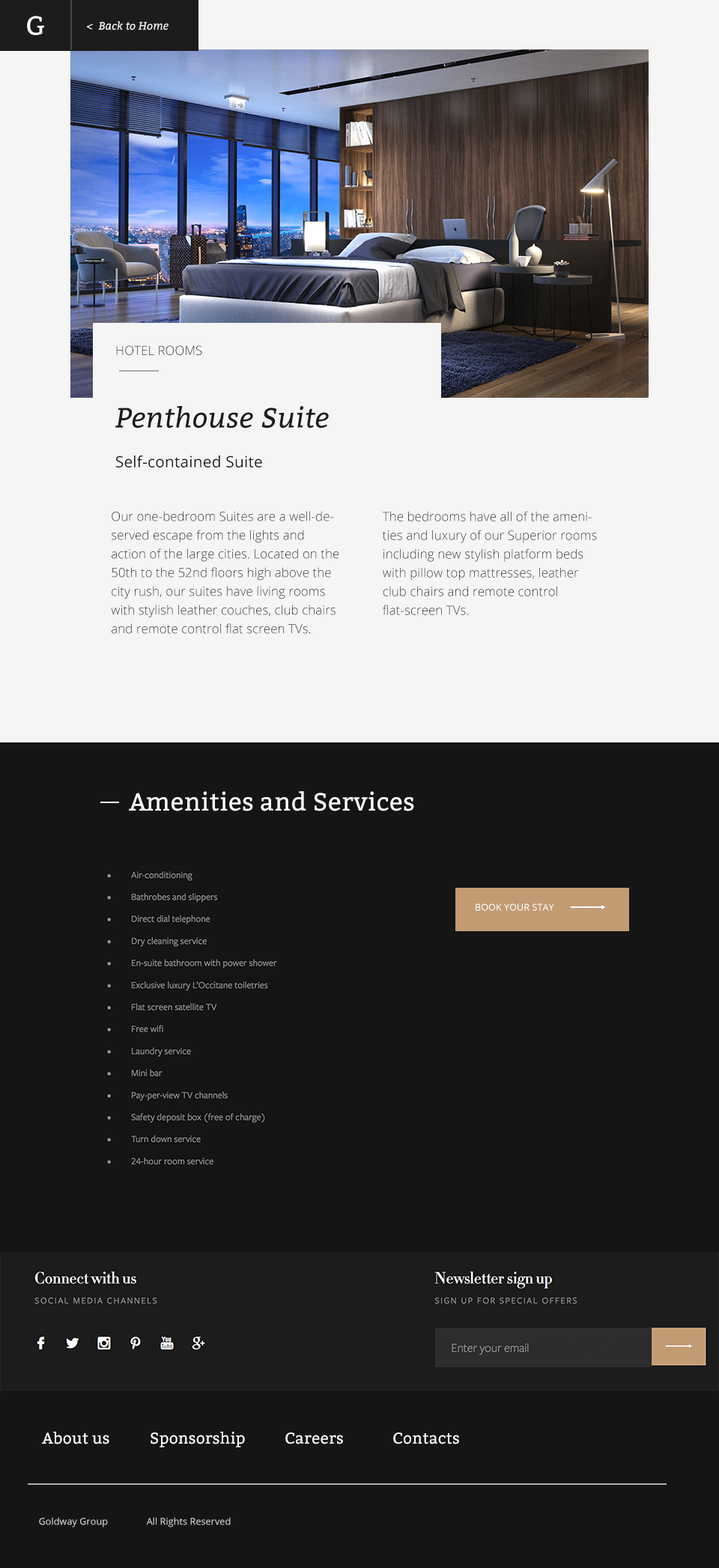
<style>
.page{position:relative;width:719px;height:1568px;background:#151515}
.page>*{position:absolute;margin:0}
.t1{font:25.9px "Bitter-Regular";letter-spacing:0.01em;color:#ffffff}
.t2{font:10.8px "Bitter-Italic";letter-spacing:0.01em;color:#ffffff}
.t3{font:12.5px "OpenSans-Light";letter-spacing:0.01em;color:#1c1c1c}
.t4{font:28.1px "Bitter-Italic";letter-spacing:0.01em;color:#1c1c1c}
.t5{font:15.6px "OpenSans";letter-spacing:0.01em;color:#1c1c1c}
.t6{font:12.5px/18.7px "OpenSans-Light";letter-spacing:0.01em;color:#1c1c1c}
.t7{font:25px "Bitter-Regular";letter-spacing:0.01em;color:#ffffff}
.t8{font:9.4px "OpenSans";letter-spacing:0.01em;color:#ffffff}
.t9{font:15.6px "Bitter-Regular";letter-spacing:0.01em;color:#ffffff}
.t10{font:9.4px "OpenSans";letter-spacing:0.01em;color:#d7d4d4}
</style>
<div class="page">
<p class="t1" style="left:27px;top:16px;width:17px;height:19px">G</p>
<p class="t2" style="left:87px;top:21px;width:82px;height:9px">&lt;  Back to Home</p>
<p class="t3" style="left:116px;top:345px;width:86px;height:10px">HOTEL ROOMS</p>
<p class="t4" style="left:115px;top:406px;width:214px;height:23px">Penthouse Suite</p>
<p class="t5" style="left:115px;top:455px;width:147px;height:12px">Self-contained Suite</p>
<p class="t6" style="left:111px;top:511px;width:228px;height:123px">Our one-bedroom Suites are a well-deserved escape from the lights and action of the large cities. Located on the 50th to the 52nd floors high above the city rush, our suites have living rooms with stylish leather couches, club chairs and remote control flat screen TVs.</p>
<p class="t6" style="left:382px;top:511px;width:215px;height:104px">The bedrooms have all of the amenities and luxury of our Superior rooms including new stylish platform beds with pillow top mattresses, leather club chairs and remote control flat-screen TVs.</p>
<p class="t7" style="left:129px;top:791px;width:285px;height:20px">Amenities and Services</p>
<p class="t8" style="left:476px;top:903px;width:78px;height:8px">BOOK YOUR STAY</p>
<p class="t9" style="left:42px;top:1432px;width:417px;height:15px">About us  Sponsorship  Careers  Contacts</p>
<p class="t10" style="left:39px;top:1517px;width:192px;height:11px">Goldway Group  All Rights Reserved</p>
</div>
